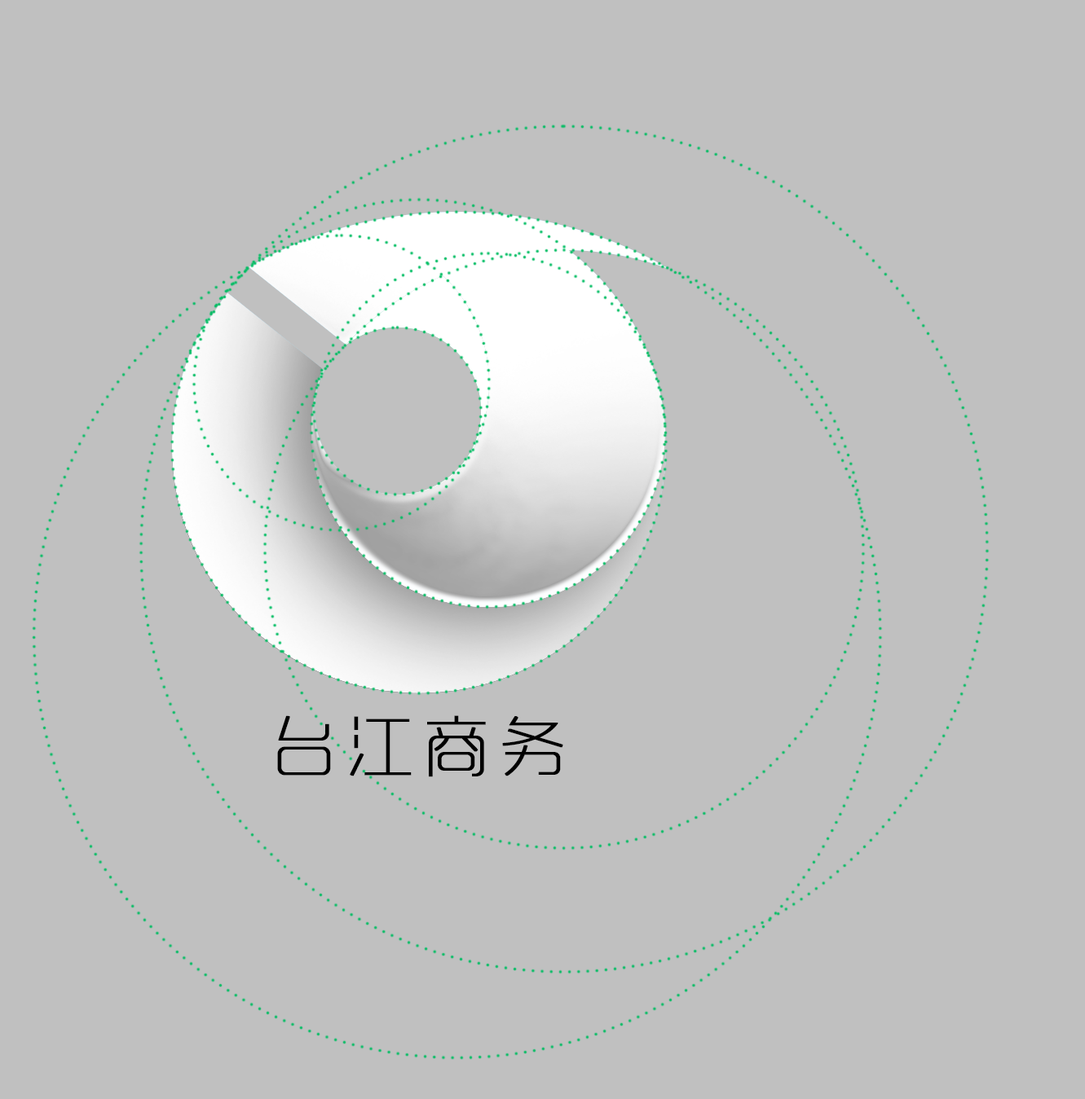
<style>
.page{position:relative;width:1085px;height:1099px;background:#c0c0c0}
.page>*{position:absolute;margin:0}
.t1{font:64.6px "RTWSYueGoTrial-ExLight";letter-spacing:0.152em;color:#000000;font-weight:bold}
</style>
<div class="page">
<p class="t1" style="left:277px;top:716px;width:286px;height:61px">台江商务</p>
</div>
